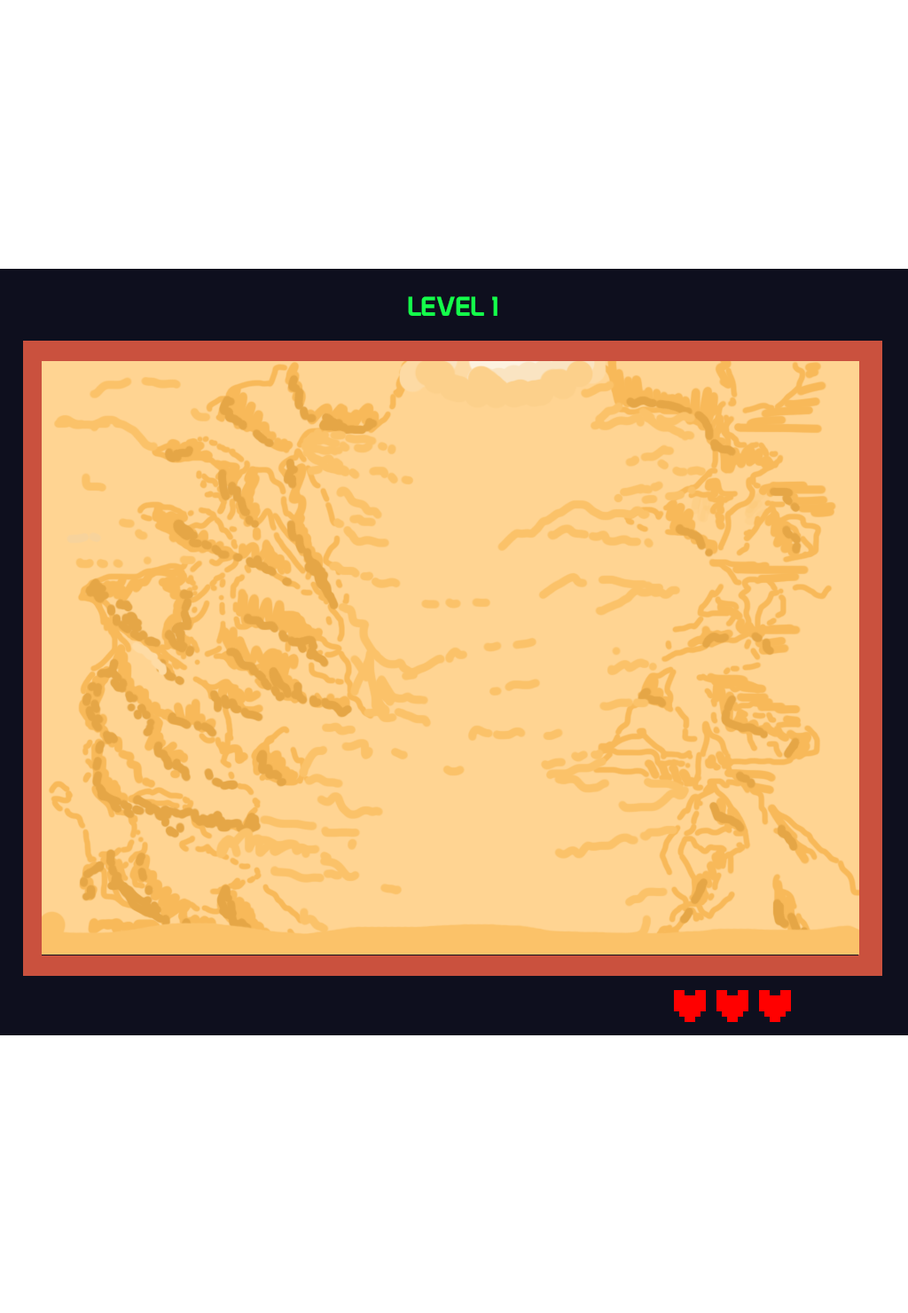
<style>
.page{position:relative;width:908px;height:1313px;background:#ffffff}
.page>*{position:absolute;margin:0}
.t1{font:26.6px "Prototype";color:#14ff4b}
</style>
<div class="page">
<p class="t1" style="left:408px;top:296px;width:90px;height:20px">LEVEL 1</p>
</div>
